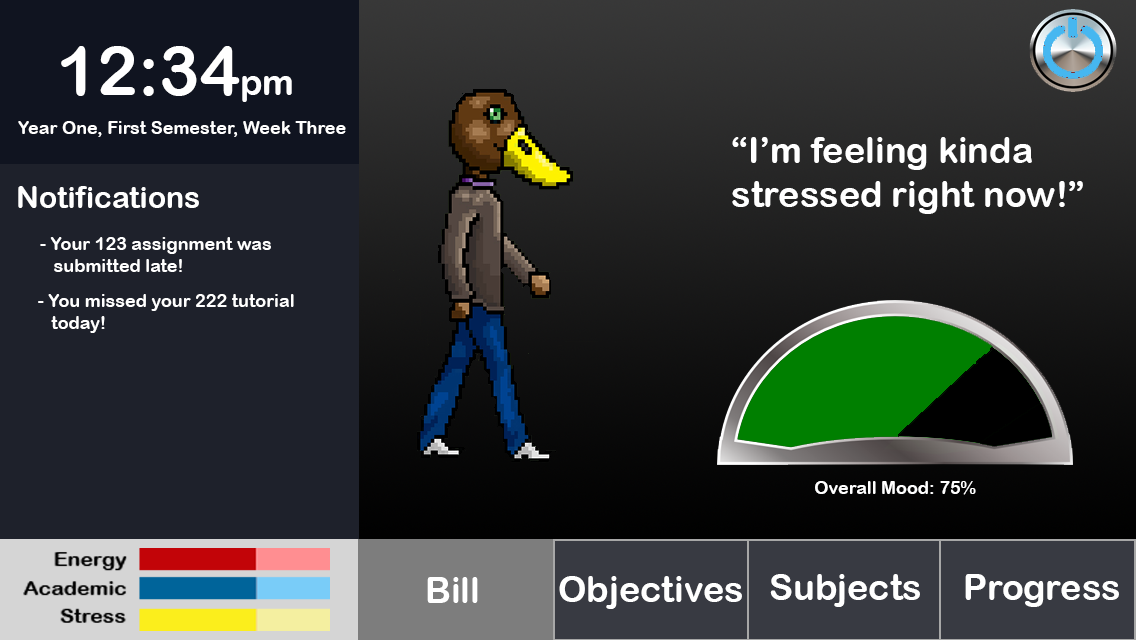
<style>
.page{position:relative;width:1136px;height:640px}
.page>*{position:absolute;margin:0}
.t1{font:68px "ArialRoundedMTBold";color:#ffffff}
.t2{font:36px "ArialRoundedMTBold";color:#ffffff}
.t3{font:18px "ArialRoundedMTBold";color:#ffffff}
.t4{font:30px "ArialRoundedMTBold";color:#ffffff}
</style>
<div class="page">
<p class="t1" style="left:61px;top:46px;width:231px;height:56px">12:34<span class="t2">pm</span></p>
<p class="t3" style="left:18px;top:121px;width:328px;height:16px">Year One, First Semester, Week Three</p>
<p class="t2" style="left:732px;top:137px;width:351px;height:77px">“I’m feeling kinda <br>stressed right now!”</p>
<p class="t4" style="left:18px;top:186px;width:181px;height:22px">Notifications</p>
<p class="t3" style="left:40px;top:237px;width:231px;height:35px">- Your 123 assignment was <br>   submitted late!</p>
<p class="t3" style="left:38px;top:294px;width:256px;height:39px">- You missed your 222 tutorial <br>   today!</p>
<p class="t3" style="left:815px;top:481px;width:161px;height:14px">Overall Mood: 75%</p>
<p class="t2" style="left:427px;top:577px;width:51px;height:26px">Bill</p>
<p class="t2" style="left:559px;top:576px;width:183px;height:33px">Objectives</p>
<p class="t2" style="left:770px;top:574px;width:150px;height:33px">Subjects</p>
<p class="t2" style="left:965px;top:574px;width:154px;height:33px">Progress</p>
</div>
